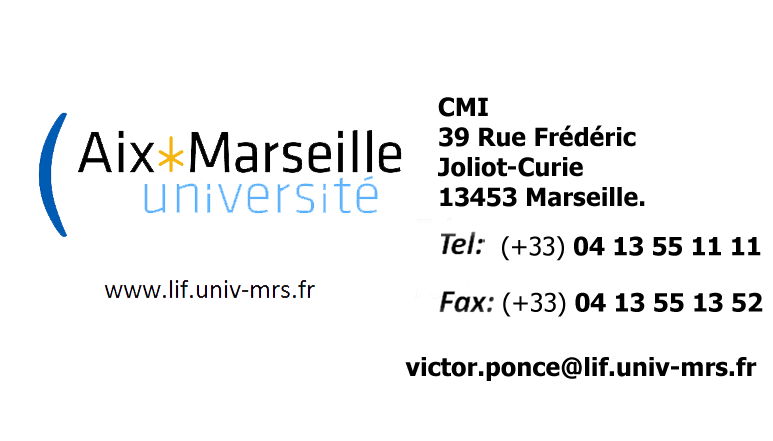
<style>
.page{position:relative;width:773px;height:441px;background:#ffffff}
.page>*{position:absolute;margin:0}
.t1{font:25px "Tahoma-Bold";color:#000000}
.t2{font:25px "Tahoma";color:#000000}
</style>
<div class="page">
<p class="t1" style="left:438px;top:97px;width:207px;height:110px">CMI<br>39 Rue Frédéric <br>Joliot-Curie<br>13453 Marseille.</p>
<p class="t1" style="left:502px;top:236px;width:259px;height:25px"><span class="t2">(+33) </span>04 13 55 11 11</p>
<p class="t1" style="left:503px;top:292px;width:260px;height:25px"><span class="t2">(+33) </span>04 13 55 13 52</p>
<p class="t1" style="left:405px;top:357px;width:352px;height:24px">victor.ponce@lif.univ-mrs.fr</p>
</div>
